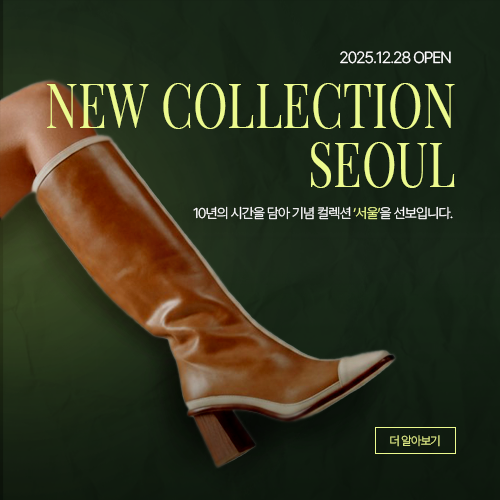
<style>
.page{position:relative;width:500px;height:500px}
.page>*{position:absolute;margin:0}
.t1{font:16px "Pretendard-Light";letter-spacing:-0.06em;color:#ffffff}
.t2{font:63px/59px "PlayfairDisplaySC-Regular";color:#ecfa8e;scale:0.74 1}
.t3{font:14px "Pretendard-Light";letter-spacing:-0.06em;color:#ffffff}
.t4{font:14px "Pretendard-Light";letter-spacing:-0.06em;color:#ecfa8e}
.t5{font:12px "Pretendard-ExtraLight";letter-spacing:-0.06em;color:#d8e582}
</style>
<div class="page">
<p class="t1" style="left:340px;top:51px;width:111px;height:13px">2025.12.28 OPEN</p>
<p class="t2" style="left:47px;top:83px;width:408px;height:105px;text-align:right">NEW COLLECTION<br>SEOUL</p>
<p class="t3" style="left:193px;top:206px;width:260px;height:14px">10년의 시간을 담아 기념 컬렉션 <span class="t4">‘서울’</span>을 선보입니다.</p>
<p class="t5" style="left:390px;top:435px;width:50px;height:12px">더 알아보기</p>
</div>
